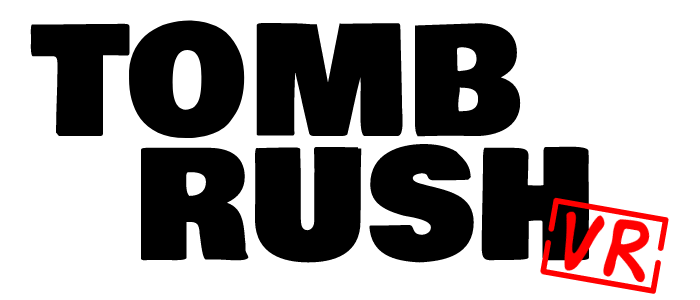
<style>
.page{position:relative;width:700px;height:300px;background:#ffffff}
.page>*{position:absolute;margin:0}
.t1{font:150px "BowlbyOneSC-Regular";color:#000000}
</style>
<div class="page">
<p class="t1" style="left:30px;top:20px;width:491px;height:119px">TOMB</p>
<p class="t1" style="left:141px;top:144px;width:448px;height:119px">RUSH</p>
</div>
